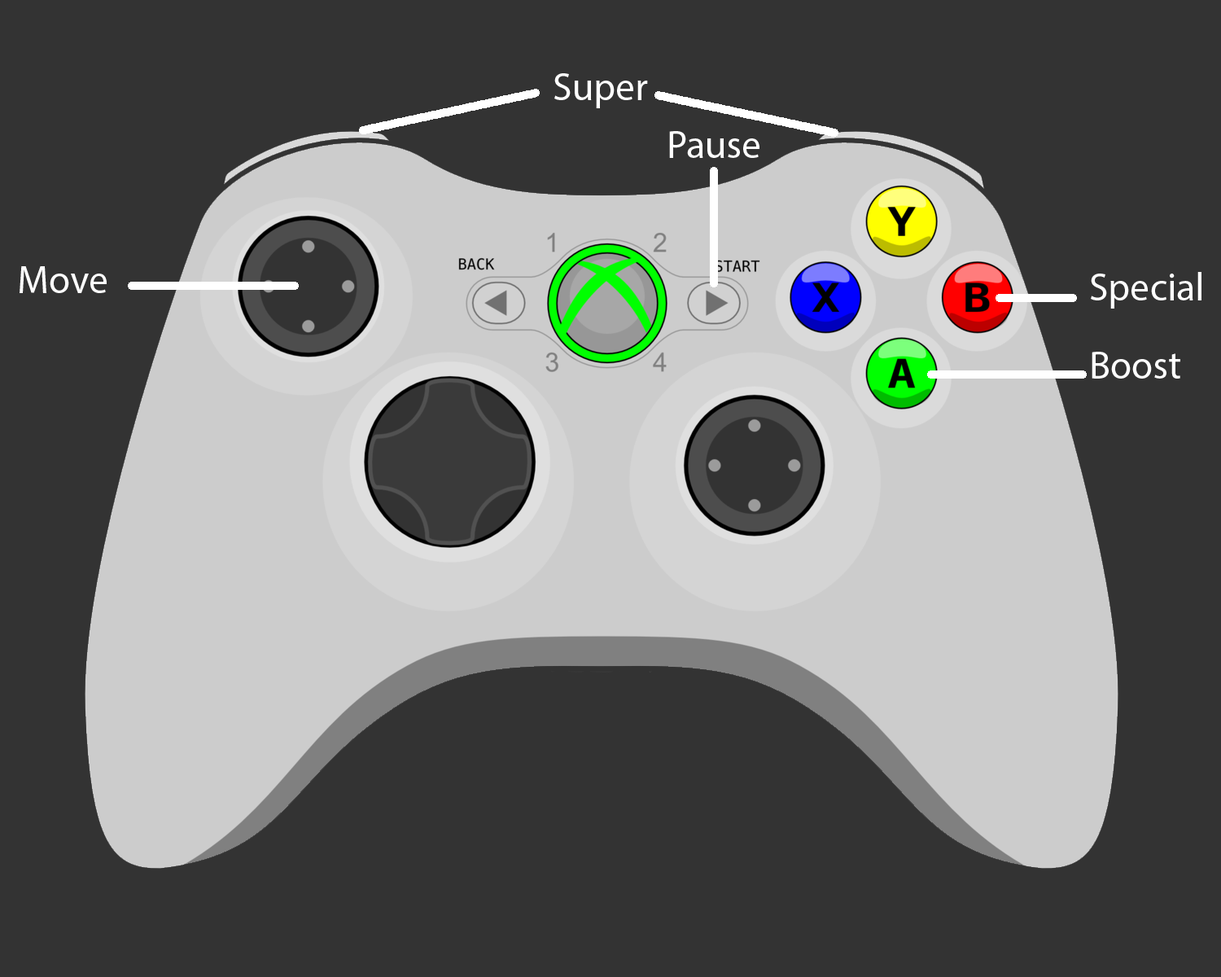
<style>
.page{position:relative;width:1221px;height:977px;background:#333333}
.page>*{position:absolute;margin:0}
.t1{font:39.1px "MyriadPro-Regular";color:#ffffff}
</style>
<div class="page">
<p class="t1" style="left:554px;top:73px;width:94px;height:35px">Super</p>
<p class="t1" style="left:669px;top:131px;width:90px;height:27px">Pause</p>
<p class="t1" style="left:20px;top:266px;width:87px;height:27px">Move</p>
<p class="t1" style="left:1091px;top:272px;width:110px;height:36px">Special</p>
<p class="t1" style="left:1091px;top:352px;width:89px;height:26px">Boost</p>
</div>
